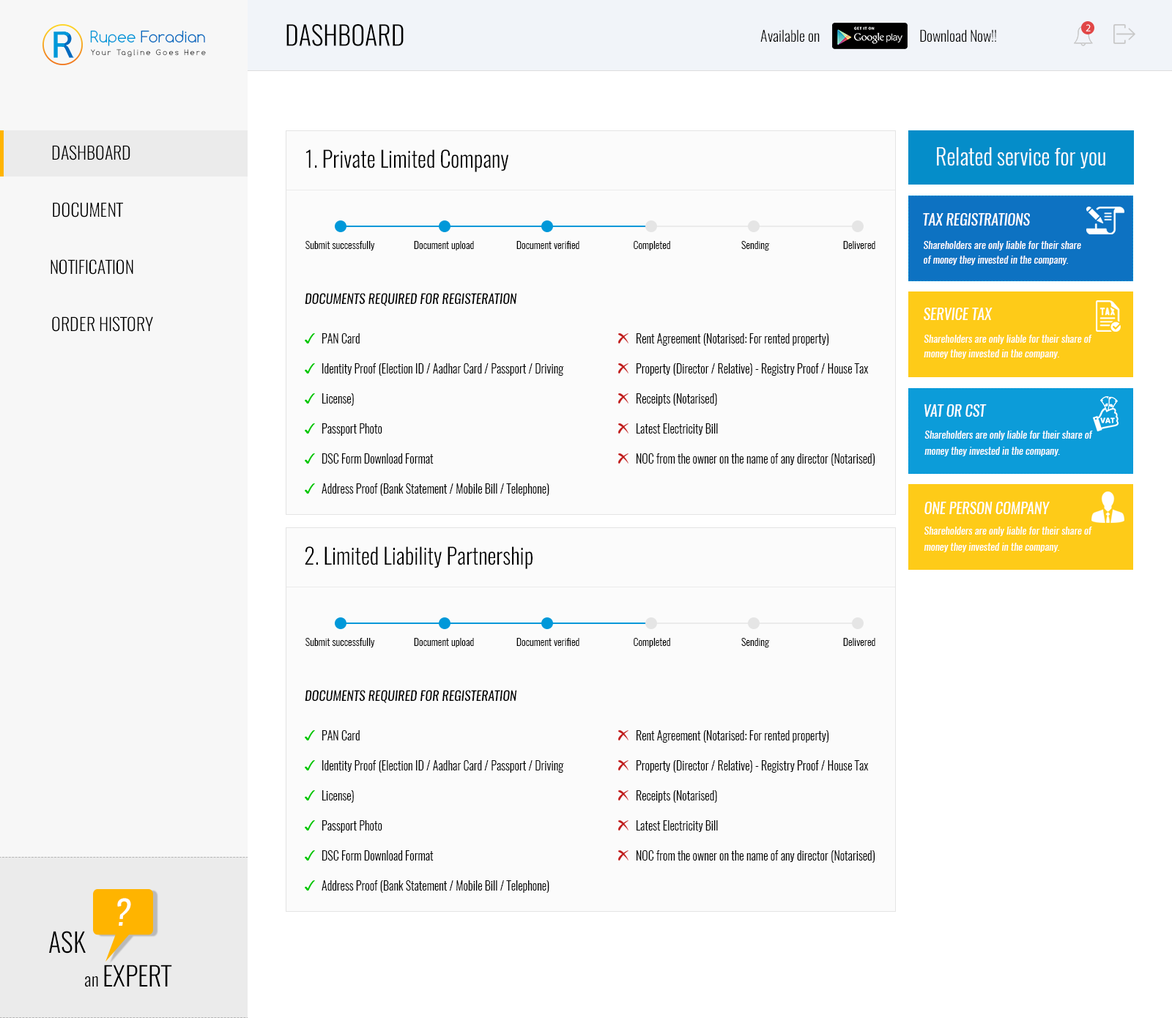
<style>
.page{position:relative;width:1172px;height:1018px;background:#fbfbfb}
.page>*{position:absolute;margin:0}
.t1{font:26.4px "Oswald-Light";color:#000000;text-transform:uppercase}
.t2{font:10.3px "MyriadHebrew-Regular";color:#ffffff}
.t3{font:15.2px "Comfortaa";color:#026abf}
.t4{font:15.2px "Comfortaa";color:#0098d9}
.t5{font:7.3px "Comfortaa";letter-spacing:0.22em}
.t6{font:17.6px/57.1px "Oswald-Light";color:#000000;text-transform:uppercase}
.t7{font:22px "Oswald-Light";color:#000000}
.t8{font:22px "Oswald-Light";color:#ffffff}
.t9{font:14.6px "Oswald-RegularItalic";color:#ffffff;text-transform:uppercase}
.t10{font:10.3px "Oswald-Light";color:#000000}
.t11{font:10.3px/14.6px "Oswald-RegularItalic";color:#ffffff}
.t12{font:13.2px "Oswald-RegularItalic";color:#000000;text-transform:uppercase}
.t13{font:14.6px "Oswald-RegularItalic";color:#fffefe;text-transform:uppercase}
.t14{font:11.7px/30px "Oswald-Light";color:#000000}
.t15{font:10.3px/14.6px "Oswald-RegularItalic";color:#fffefe}
.t16{font:10.3px/16.1px "Oswald-RegularItalic";color:#ffffff}
.t17{font:33.7px "Oswald-RegularItalic";color:#ffffff}
.t18{font:17.6px "Oswald-Light";color:#000000}
</style>
<div class="page">
<p class="t1" style="left:286px;top:24px;width:117px;height:22px">dashboard</p>
<p class="t2" style="left:1085px;top:24px;width:5px;height:7px">2</p>
<p class="t3" style="left:90px;top:30px;width:115px;height:16px"><span class="t4">Rupee </span>Foradian</p>
<p class="t5" style="left:91px;top:49px;width:115px;height:8px">Your Tagline Goes Here</p>
<p class="t6" style="left:51px;top:145px;width:102px;height:187px;text-align:right">dashboard<br>Document<br>Notification<br>order History</p>
<p class="t7" style="left:306px;top:149px;width:203px;height:23px">1. Private Limited Company</p>
<p class="t8" style="left:937px;top:147px;width:168px;height:21px">Related service for you</p>
<p class="t9" style="left:923px;top:213px;width:107px;height:13px">Tax Registrations</p>
<p class="t10" style="left:305px;top:241px;width:70px;height:9px">Submit successfully</p>
<p class="t10" style="left:414px;top:241px;width:60px;height:9px">Document upload</p>
<p class="t10" style="left:516px;top:241px;width:63px;height:8px">Document verified</p>
<p class="t10" style="left:633px;top:241px;width:37px;height:9px">Completed</p>
<p class="t10" style="left:741px;top:241px;width:29px;height:9px">Sending</p>
<p class="t10" style="left:843px;top:241px;width:32px;height:8px">Delivered</p>
<p class="t11" style="left:923px;top:241px;width:158px;height:24px">Shareholders are only liable for their share of money they invested in the company.</p>
<p class="t12" style="left:305px;top:293px;width:212px;height:13px">DOCUMENTS REQUIRED FOR REGISTERATION</p>
<p class="t13" style="left:923px;top:308px;width:69px;height:12px">Service Tax</p>
<p class="t14" style="left:321px;top:333px;width:243px;height:163px">PAN Card<br>Identity Proof (Election ID / Aadhar Card / Passport / Driving License)<br>Passport Photo<br>DSC Form Download Format<br>Address Proof (Bank Statement / Mobile Bill / Telephone)</p>
<p class="t14" style="left:636px;top:333px;width:239px;height:133px">Rent Agreement (Notarised: For rented property)<br>Property (Director / Relative) - Registry Proof / House Tax Receipts (Notarised)<br>Latest Electricity Bill<br>NOC from the owner on the name of any director (Notarised)</p>
<p class="t15" style="left:923px;top:335px;width:169px;height:24px">Shareholders are only liable for their share of money they invested in the company.</p>
<p class="t9" style="left:924px;top:404px;width:62px;height:13px">VAT or CST</p>
<p class="t16" style="left:924px;top:431px;width:168px;height:25px">Shareholders are only liable for their share of money they invested in the company.</p>
<p class="t9" style="left:924px;top:502px;width:125px;height:12px">One Person Company</p>
<p class="t16" style="left:923px;top:526px;width:169px;height:26px">Shareholders are only liable for their share of money they invested in the company.</p>
<p class="t7" style="left:305px;top:546px;width:227px;height:23px">2. Limited Liability Partnership</p>
<p class="t10" style="left:305px;top:638px;width:70px;height:9px">Submit successfully</p>
<p class="t10" style="left:414px;top:638px;width:60px;height:9px">Document upload</p>
<p class="t10" style="left:516px;top:638px;width:63px;height:8px">Document verified</p>
<p class="t10" style="left:633px;top:638px;width:37px;height:9px">Completed</p>
<p class="t10" style="left:741px;top:638px;width:29px;height:9px">Sending</p>
<p class="t10" style="left:843px;top:638px;width:32px;height:8px">Delivered</p>
<p class="t12" style="left:305px;top:690px;width:212px;height:13px">DOCUMENTS REQUIRED FOR REGISTERATION</p>
<p class="t14" style="left:321px;top:730px;width:243px;height:163px">PAN Card<br>Identity Proof (Election ID / Aadhar Card / Passport / Driving License)<br>Passport Photo<br>DSC Form Download Format<br>Address Proof (Bank Statement / Mobile Bill / Telephone)</p>
<p class="t14" style="left:636px;top:730px;width:239px;height:133px">Rent Agreement (Notarised: For rented property)<br>Property (Director / Relative) - Registry Proof / House Tax Receipts (Notarised)<br>Latest Electricity Bill<br>NOC from the owner on the name of any director (Notarised)</p>
<p class="t17" style="left:117px;top:898px;width:14px;height:28px">?</p>
<p class="t1" style="left:49px;top:931px;width:37px;height:22px">Ask</p>
<p class="t1" style="left:85px;top:964px;width:87px;height:23px"><span class="t18">an </span>expert</p>
</div>
